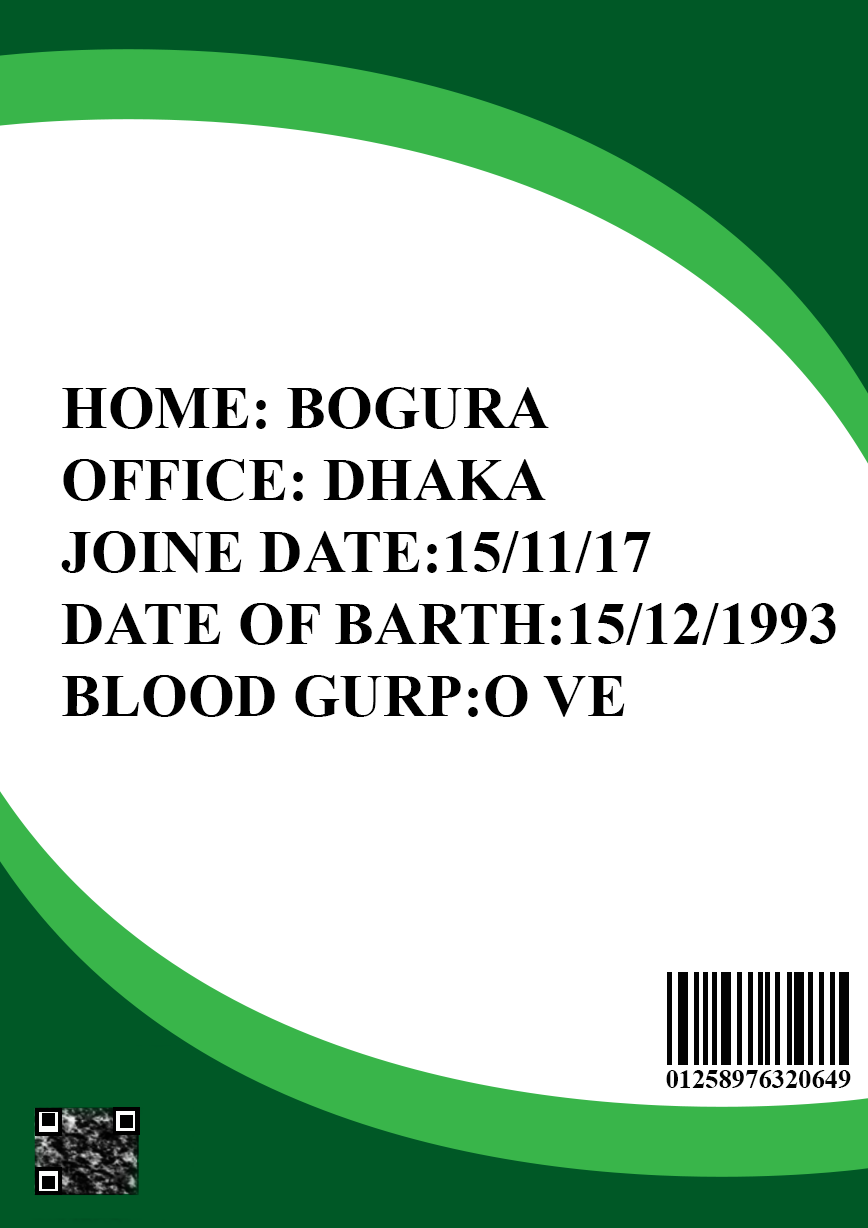
<style>
.page{position:relative;width:868px;height:1228px;background:#ffffff}
.page>*{position:absolute;margin:0}
.t1{font:60px "TimesNewRomanPS-BoldMT";color:#000000;text-transform:uppercase}
.t2{font:26.5px "TimesNewRomanPS-BoldMT";color:#030303;text-transform:uppercase}
</style>
<div class="page">
<p class="t1" style="left:61px;top:387px;width:775px;height:330px;text-align:right">home: bogura<br>office: dhaka<br>joine date:15/11/17<br>date of barth:15/12/1993<br>blood gurp:o ve</p>
<p class="t2" style="left:666px;top:1070px;width:185px;height:18px">01258976320649</p>
</div>
